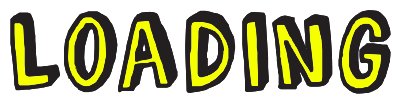
<style>
.page{position:relative;width:400px;height:100px;background:#ffffff}
.page>*{position:absolute;margin:0}
.t1{font:130px "ComicZineOT";color:#231f20}
</style>
<div class="page">
<p class="t1" style="left:10px;top:10px;width:381px;height:84px">Loading</p>
</div>
